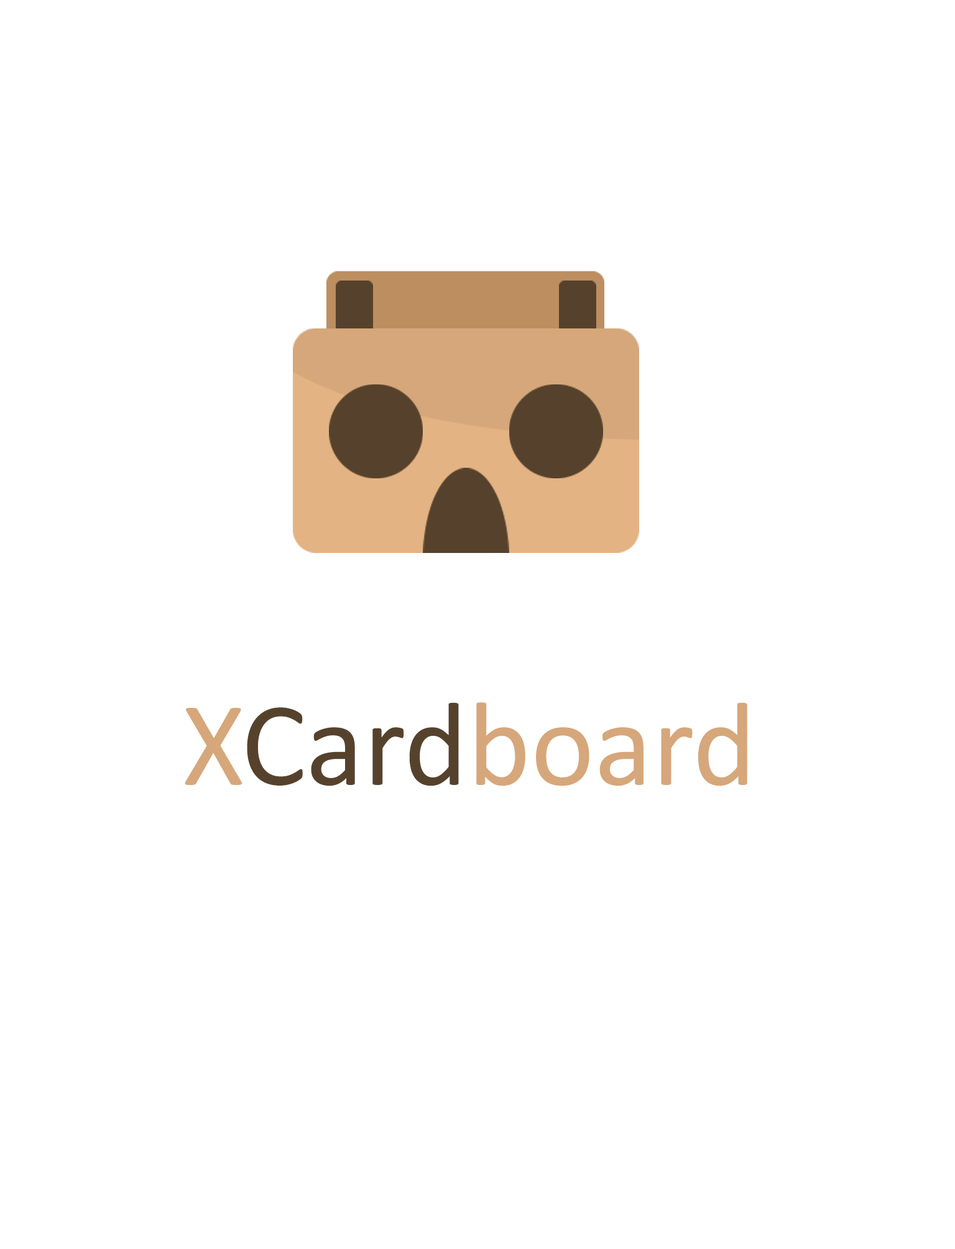
<style>
.page{position:relative;width:955px;height:1249px;background:#ffffff}
.page>*{position:absolute;margin:0}
.t1{font:120.7px "Calibri";color:#d6a77a}
.t2{font:120.7px "Calibri";color:#56422c}
</style>
<div class="page">
<p class="t1" style="left:185px;top:702px;width:562px;height:84px">X<span class="t2">Card</span>board</p>
</div>
